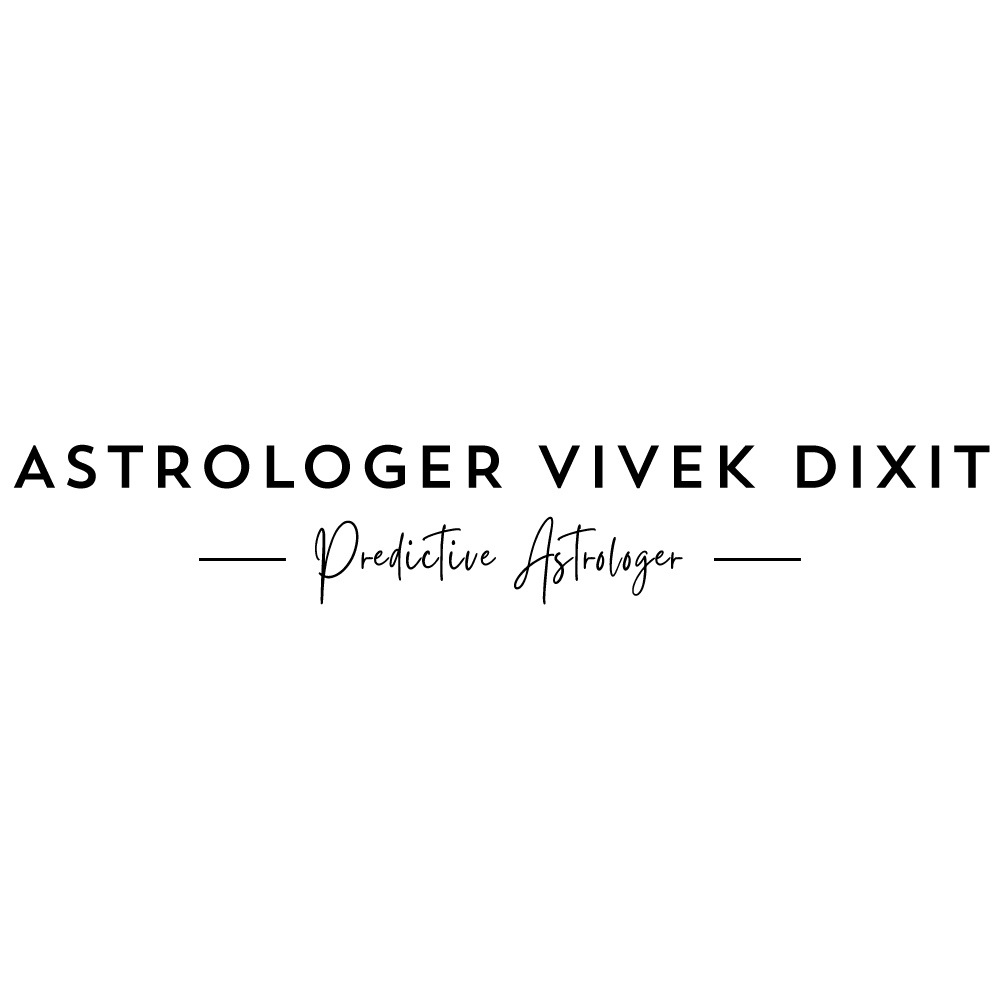
<style>
.page{position:relative;width:1000px;height:1000px;background:#ffffff}
.page>*{position:absolute;margin:0}
.t1{font:60px "TrendSansOne";letter-spacing:0.046em;color:#000000}
.t2{font:66.9px "Gistesy";letter-spacing:0.046em;color:#000000;scale:0.89 1}
</style>
<div class="page">
<p class="t1" style="left:13px;top:444px;width:977px;height:45px">ASTROLOGER VIVEK DIXIT</p>
<p class="t2" style="left:315px;top:516px;width:368px;height:89px">Predictive Astrologer</p>
</div>
